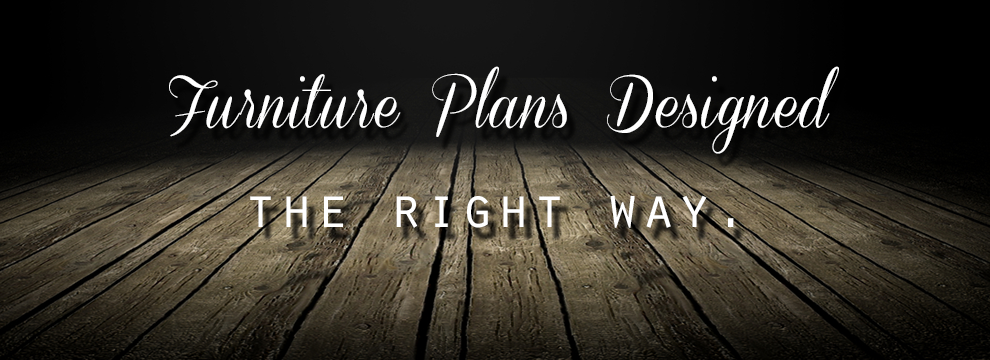
<style>
.page{position:relative;width:990px;height:360px}
.page>*{position:absolute;margin:0}
.t1{font:58.3px/100px "ConeriaScriptDemo";letter-spacing:0.02em;color:#ffffff}
.t2{font:58.3px/100px "OratorStd";letter-spacing:0.02em;color:#ffffff}
</style>
<div class="page">
<p class="t1" style="left:169px;top:66px;width:670px;height:162px;text-align:center">Furniture Plans Designed<br><span class="t2">the right way.</span></p>
</div>
